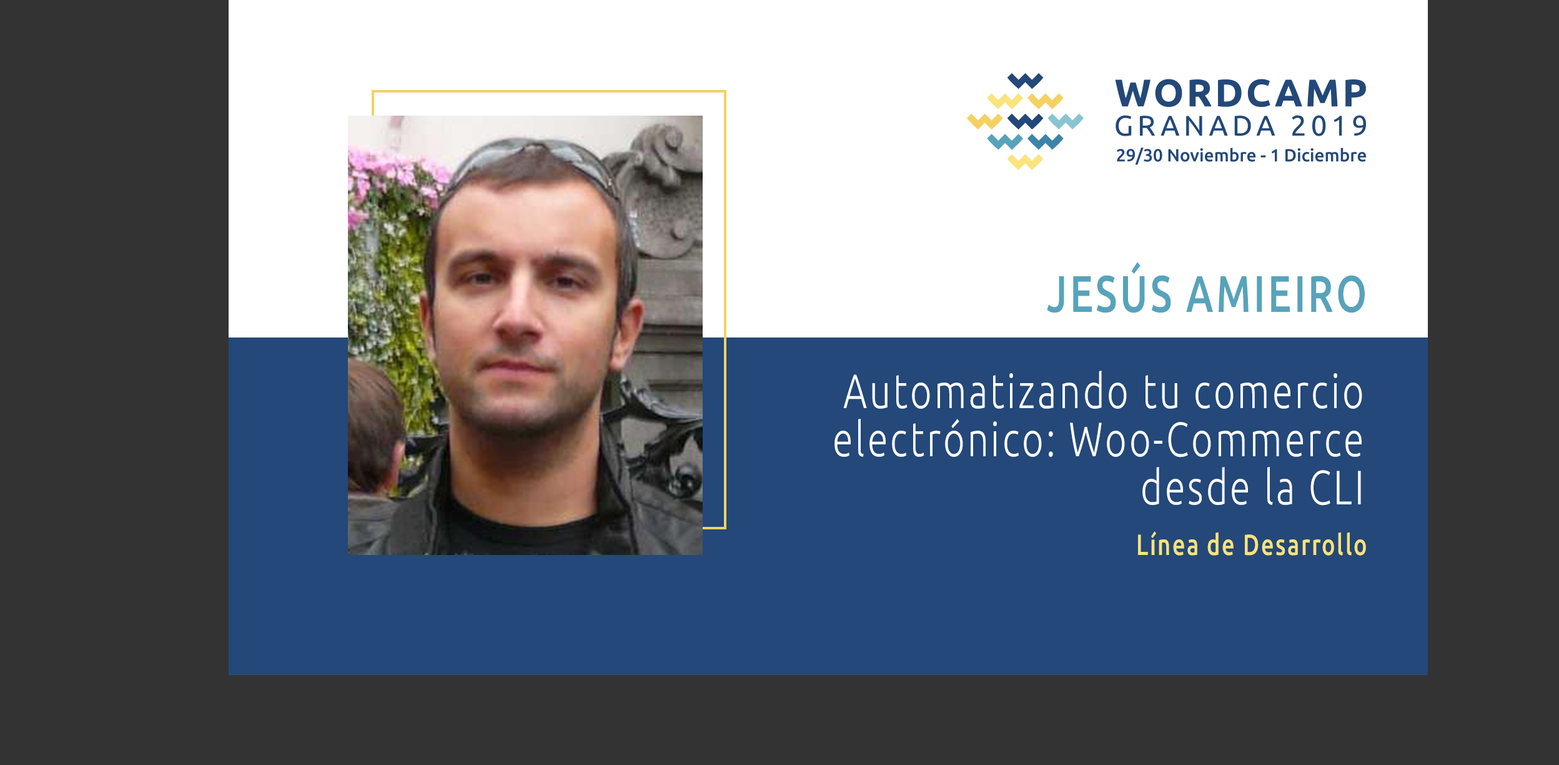
<style>
.page{position:relative;width:1559px;height:765px;background:#333333}
.page>*{position:absolute;margin:0}
.t1{font:51.4px "Ubuntu-Medium";letter-spacing:0.068em;color:#57a3bb;text-transform:uppercase;scale:0.77 1}
.t2{font:48.2px/48.2px "Ubuntu-Light";letter-spacing:0.068em;color:#ffffff;scale:0.77 1}
.t3{font:29.2px "Ubuntu-Medium";letter-spacing:0.068em;color:#f9e37b;scale:0.77 1}
</style>
<div class="page">
<p class="t1" style="left:1047px;top:262px;width:318px;height:51px">Jesús Amieiro</p>
<p class="t2" style="left:835px;top:370px;width:528px;height:135px;text-align:right">Automatizando tu comercio electrónico: Woo-Commerce desde la CLI</p>
<p class="t3" style="left:1138px;top:531px;width:228px;height:24px">Línea de Desarrollo</p>
</div>
